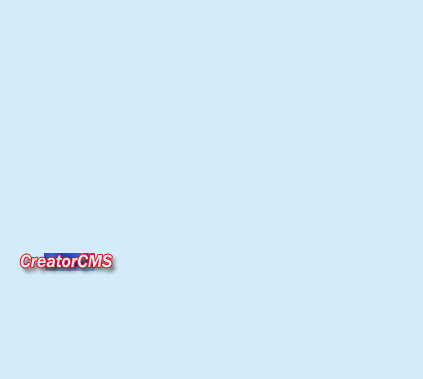
<style>
.page{position:relative;width:423px;height:379px;background:#d4ebf9}
.page>*{position:absolute;margin:0}
.t1{font:18px "FranklinGothic-MediumItalic";color:#d4ebf9}
</style>
<div class="page">
<p class="t1" style="left:20px;top:254px;width:92px;height:14px">CreatorCMS</p>
</div>
